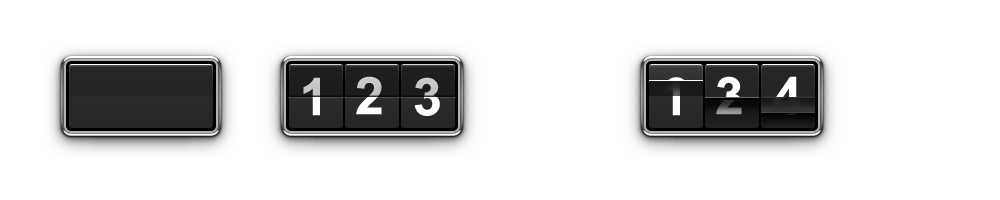
<style>
.page{position:relative;width:1000px;height:200px;background:#ffffff}
.page>*{position:absolute;margin:0}
.t1{font:52px "Arial-BoldMT"}
</style>
<div class="page">
<p class="t1" style="left:303px;top:77px;width:17px;height:39px">1</p>
<p class="t1" style="left:356px;top:76px;width:26px;height:39px">2</p>
<p class="t1" style="left:414px;top:77px;width:26px;height:39px">3</p>
<p class="t1" style="left:663px;top:77px;width:17px;height:39px">1</p>
<p class="t1" style="left:716px;top:76px;width:26px;height:39px">2</p>
<p class="t1" style="left:716px;top:76px;width:26px;height:39px">3</p>
<p class="t1" style="left:773px;top:76px;width:28px;height:39px">4</p>
</div>
